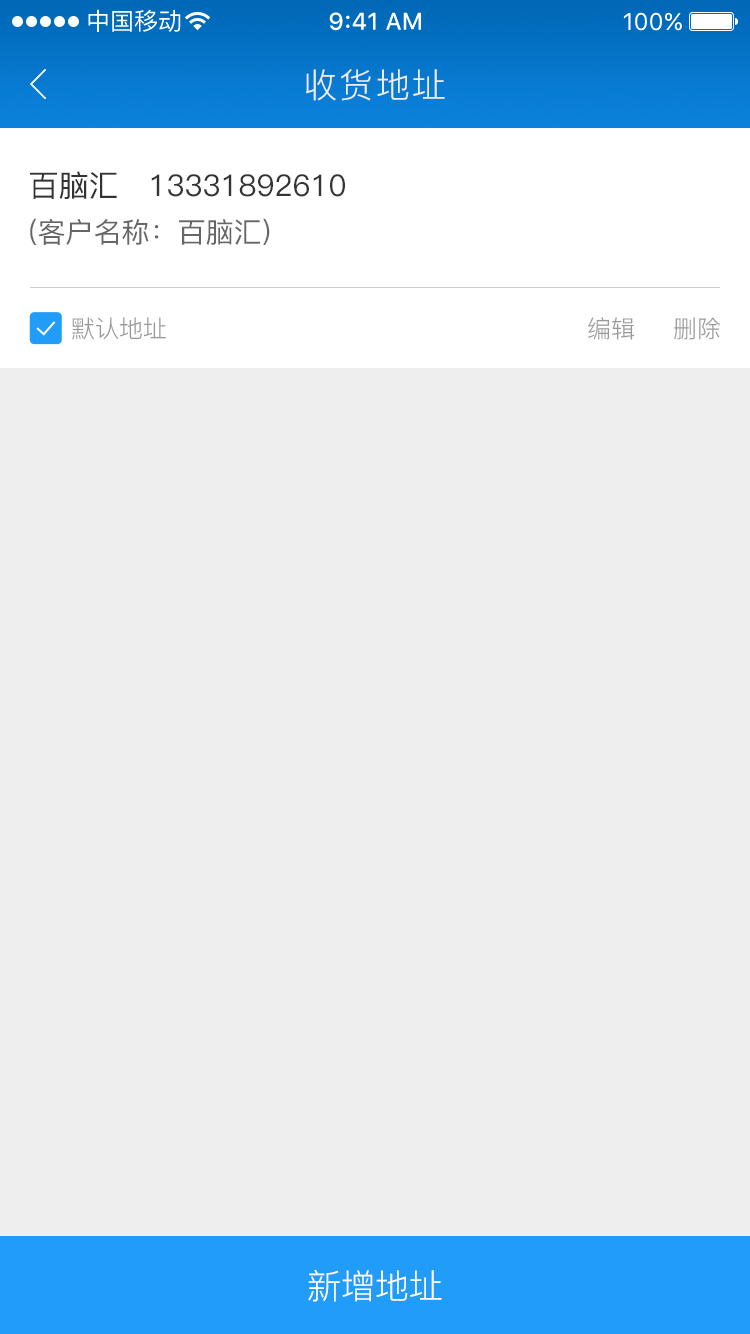
<style>
.page{position:relative;width:750px;height:1334px;background:#eeeeee}
.page>*{position:absolute;margin:0}
.t1{font:34px "PingFang-SC-Regular";letter-spacing:0.06em;color:#eeeeee}
.t2{font:30px "PingFang-SC-Medium";color:#333333}
.t3{font:28px "PingFang-SC-Medium";color:#666666}
.t4{font:24px "PingFang-SC-Regular";color:#999999}
.t5{font:34px "PingFang-SC-Regular";color:#ffffff}
</style>
<div class="page">
<p class="t1" style="left:306px;top:69px;width:139px;height:32px">收货地址</p>
<p class="t2" style="left:30px;top:171px;width:315px;height:28px">百脑汇   13331892610</p>
<p class="t3" style="left:30px;top:218px;width:240px;height:27px">(客户名称：百脑汇)</p>
<p class="t4" style="left:72px;top:317px;width:94px;height:23px">默认地址</p>
<p class="t4" style="left:588px;top:317px;width:47px;height:23px">编辑</p>
<p class="t4" style="left:674px;top:317px;width:46px;height:23px">删除</p>
<p class="t5" style="left:308px;top:1269px;width:134px;height:33px">新增地址</p>
</div>
